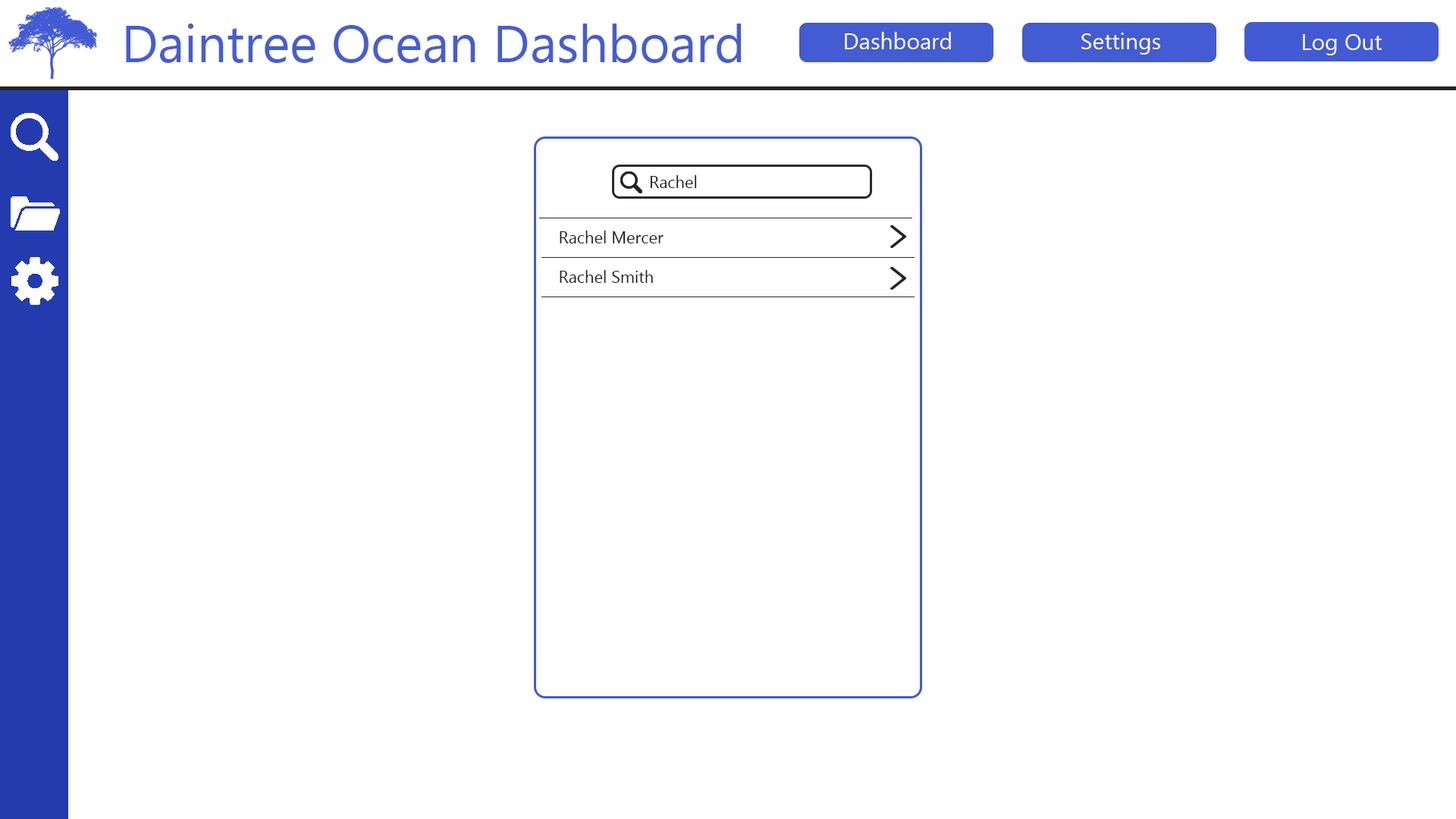
<style>
.page{position:relative;width:1456px;height:819px;background:#ffffff}
.page>*{position:absolute;margin:0}
.t1{font:52.3px "MyanmarText";color:#455dd4}
.t2{font:22.7px "MyanmarText";color:#ffffff}
.t3{font:16.7px "MyanmarText";color:#232323}
</style>
<div class="page">
<p class="t1" style="left:126px;top:24px;width:615px;height:39px">Daintree Ocean Dashboard</p>
<p class="t2" style="left:845px;top:32px;width:106px;height:17px">Dashboard</p>
<p class="t2" style="left:1081px;top:33px;width:79px;height:22px">Settings</p>
<p class="t2" style="left:1303px;top:34px;width:79px;height:21px">Log Out</p>
<p class="t3" style="left:650px;top:175px;width:47px;height:13px">Rachel</p>
<p class="t3" style="left:560px;top:231px;width:104px;height:12px">Rachel Mercer</p>
<p class="t3" style="left:560px;top:270px;width:93px;height:13px">Rachel Smith</p>
</div>
